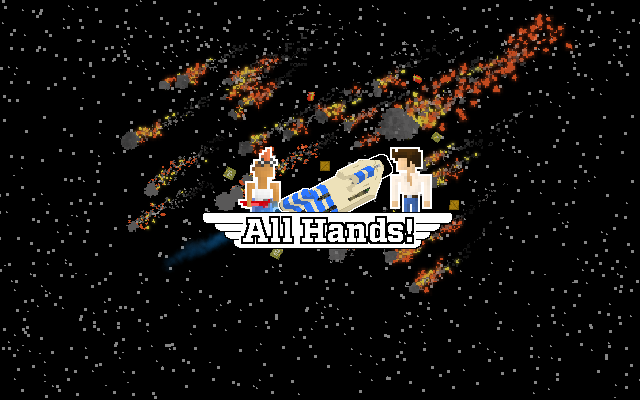
<style>
.page{position:relative;width:640px;height:400px;background:#000000}
.page>*{position:absolute;margin:0}
.t1{font:32.4px "Factoria-Black";color:#ffffff}
</style>
<div class="page">
<p class="t1" style="left:243px;top:218px;width:169px;height:24px">All Hands!</p>
</div>
